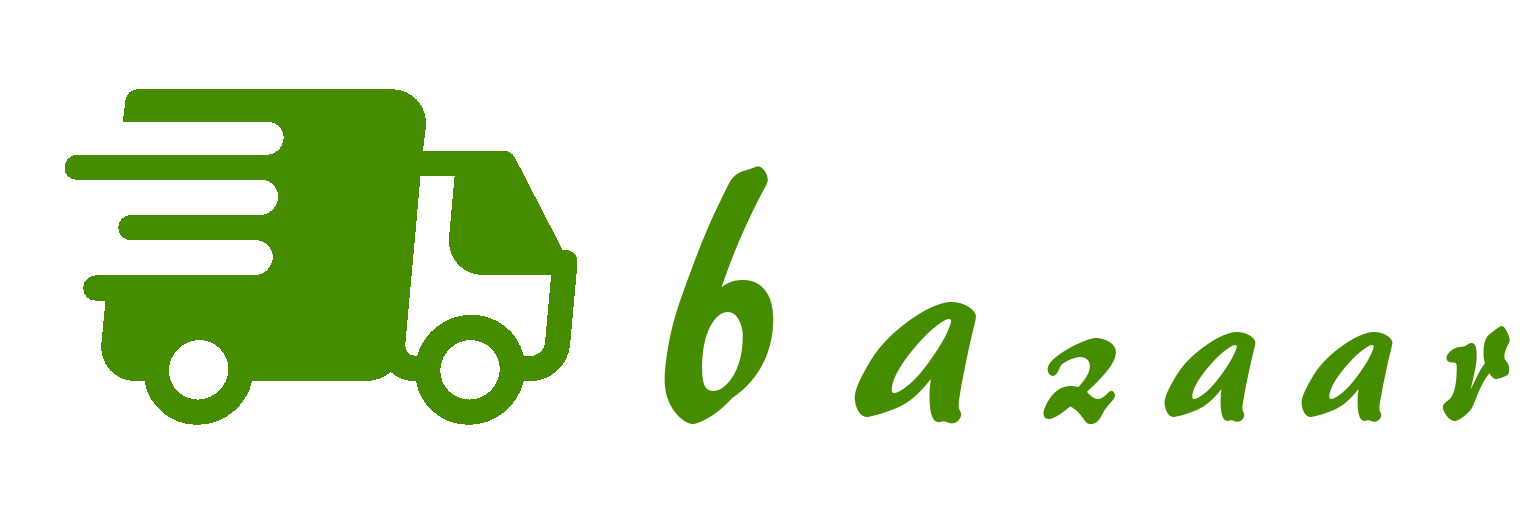
<style>
.page{position:relative;width:1536px;height:512px;background:#ffffff}
.page>*{position:absolute;margin:0}
.t1{font:214.2px "Brush445AT-Regular";letter-spacing:0.22em;color:#468c00;scale:0.89 1}
.t2{font:357px "Brush445AT-Regular";letter-spacing:0.22em;color:#468c00;scale:0.89 1}
.t3{font:285.6px "Brush445AT-Regular";letter-spacing:0.22em;color:#468c00;scale:0.89 1}
</style>
<div class="page">
<p class="t1" style="left:664px;top:166px;width:846px;height:258px"><span class="t2">b</span><span class="t3">a</span>zaar</p>
</div>
